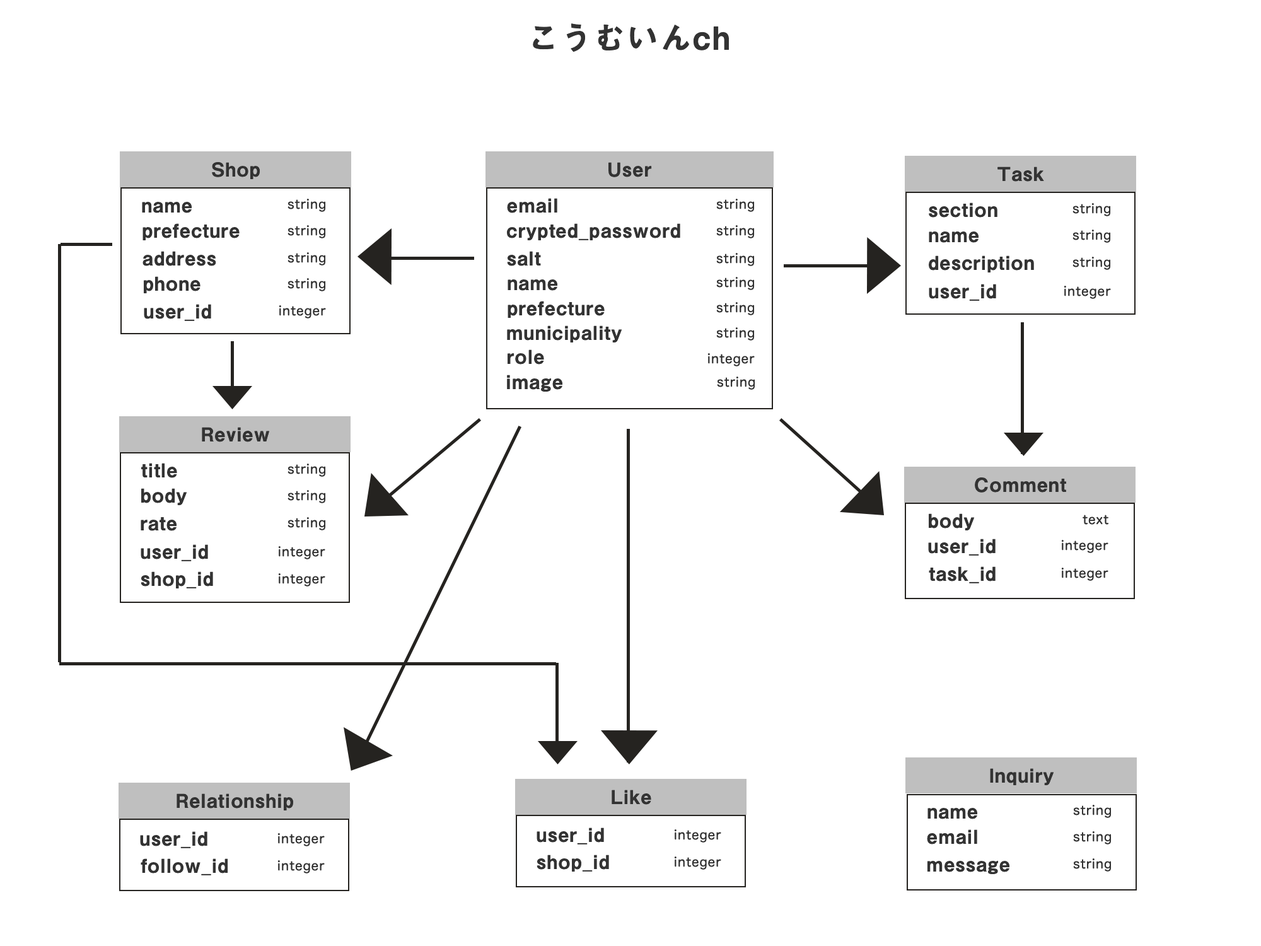
<style>
.page{position:relative;width:1261px;height:946px;background:#ffffff}
.page>*{position:absolute;margin:0}
.t1{font:31.5px "MidashiGoPr6N-MB31";letter-spacing:0.05em;color:#333333}
.t2{font:18.9px "MidashiGoPr6N-MB31";letter-spacing:0.05em;color:#333333}
.t3{font:12.6px "HiraMaruPro-W4";letter-spacing:0.05em;color:#333333}
</style>
<div class="page">
<p class="t1" style="left:533px;top:23px;width:196px;height:29px">こうむいんch</p>
<p class="t2" style="left:212px;top:162px;width:48px;height:18px">Shop</p>
<p class="t2" style="left:608px;top:162px;width:44px;height:15px">User</p>
<p class="t2" style="left:997px;top:166px;width:47px;height:16px">Task</p>
<p class="t2" style="left:507px;top:198px;width:50px;height:15px">email</p>
<p class="t2" style="left:142px;top:202px;width:50px;height:11px">name</p>
<p class="t3" style="left:287px;top:199px;width:39px;height:13px">string</p>
<p class="t3" style="left:716px;top:199px;width:39px;height:13px">string</p>
<p class="t2" style="left:929px;top:202px;width:68px;height:16px">section</p>
<p class="t3" style="left:1072px;top:203px;width:39px;height:13px">string</p>
<p class="t2" style="left:142px;top:223px;width:98px;height:18px">prefecture</p>
<p class="t3" style="left:287px;top:225px;width:39px;height:13px">string</p>
<p class="t2" style="left:507px;top:223px;width:173px;height:18px">crypted_password</p>
<p class="t3" style="left:716px;top:225px;width:39px;height:13px">string</p>
<p class="t2" style="left:929px;top:231px;width:50px;height:12px">name</p>
<p class="t3" style="left:1072px;top:229px;width:39px;height:14px">string</p>
<p class="t2" style="left:142px;top:251px;width:74px;height:15px">address</p>
<p class="t3" style="left:287px;top:252px;width:39px;height:13px">string</p>
<p class="t2" style="left:507px;top:251px;width:34px;height:15px">salt</p>
<p class="t3" style="left:716px;top:253px;width:39px;height:13px">string</p>
<p class="t2" style="left:929px;top:255px;width:105px;height:18px">description</p>
<p class="t3" style="left:1072px;top:257px;width:39px;height:13px">string</p>
<p class="t2" style="left:144px;top:276px;width:56px;height:18px">phone</p>
<p class="t3" style="left:287px;top:278px;width:39px;height:13px">string</p>
<p class="t2" style="left:508px;top:279px;width:50px;height:12px">name</p>
<p class="t3" style="left:716px;top:277px;width:39px;height:13px">string</p>
<p class="t2" style="left:929px;top:284px;width:67px;height:17px">user_id</p>
<p class="t3" style="left:1064px;top:286px;width:47px;height:13px">integer</p>
<p class="t2" style="left:144px;top:304px;width:67px;height:17px">user_id</p>
<p class="t3" style="left:279px;top:305px;width:47px;height:13px">integer</p>
<p class="t2" style="left:508px;top:301px;width:97px;height:17px">prefecture</p>
<p class="t3" style="left:716px;top:302px;width:39px;height:13px">string</p>
<p class="t2" style="left:507px;top:325px;width:115px;height:18px">municipality</p>
<p class="t3" style="left:716px;top:327px;width:39px;height:13px">string</p>
<p class="t2" style="left:508px;top:349px;width:36px;height:15px">role</p>
<p class="t3" style="left:707px;top:353px;width:48px;height:13px">integer</p>
<p class="t2" style="left:507px;top:374px;width:56px;height:18px">image</p>
<p class="t3" style="left:717px;top:376px;width:38px;height:14px">string</p>
<p class="t2" style="left:202px;top:427px;width:67px;height:15px">Review</p>
<p class="t2" style="left:141px;top:463px;width:36px;height:15px">title</p>
<p class="t3" style="left:287px;top:463px;width:39px;height:14px">string</p>
<p class="t2" style="left:975px;top:477px;width:91px;height:15px">Comment</p>
<p class="t2" style="left:141px;top:488px;width:46px;height:17px">body</p>
<p class="t3" style="left:287px;top:490px;width:39px;height:13px">string</p>
<p class="t2" style="left:141px;top:517px;width:36px;height:14px">rate</p>
<p class="t3" style="left:287px;top:517px;width:39px;height:13px">string</p>
<p class="t2" style="left:929px;top:513px;width:46px;height:17px">body</p>
<p class="t3" style="left:1082px;top:514px;width:26px;height:11px">text</p>
<p class="t2" style="left:141px;top:544px;width:67px;height:17px">user_id</p>
<p class="t3" style="left:278px;top:546px;width:47px;height:13px">integer</p>
<p class="t2" style="left:928px;top:538px;width:67px;height:17px">user_id</p>
<p class="t3" style="left:1061px;top:540px;width:47px;height:13px">integer</p>
<p class="t2" style="left:929px;top:566px;width:66px;height:17px">task_id</p>
<p class="t3" style="left:1061px;top:567px;width:47px;height:14px">integer</p>
<p class="t2" style="left:141px;top:571px;width:72px;height:18px">shop_id</p>
<p class="t3" style="left:278px;top:573px;width:47px;height:13px">integer</p>
<p class="t2" style="left:990px;top:768px;width:64px;height:18px">Inquiry</p>
<p class="t2" style="left:177px;top:793px;width:116px;height:18px">Relationship</p>
<p class="t2" style="left:612px;top:789px;width:39px;height:15px">Like</p>
<p class="t2" style="left:927px;top:808px;width:51px;height:11px">name</p>
<p class="t3" style="left:1073px;top:804px;width:38px;height:14px">string</p>
<p class="t2" style="left:140px;top:831px;width:67px;height:17px">user_id</p>
<p class="t3" style="left:277px;top:833px;width:48px;height:13px">integer</p>
<p class="t2" style="left:537px;top:827px;width:67px;height:17px">user_id</p>
<p class="t3" style="left:674px;top:829px;width:47px;height:13px">integer</p>
<p class="t2" style="left:927px;top:829px;width:50px;height:15px">email</p>
<p class="t3" style="left:1073px;top:831px;width:38px;height:13px">string</p>
<p class="t2" style="left:537px;top:854px;width:72px;height:18px">shop_id</p>
<p class="t3" style="left:674px;top:856px;width:47px;height:13px">integer</p>
<p class="t2" style="left:141px;top:858px;width:87px;height:17px">follow_id</p>
<p class="t3" style="left:277px;top:860px;width:48px;height:13px">integer</p>
<p class="t2" style="left:927px;top:861px;width:83px;height:13px">message</p>
<p class="t3" style="left:1073px;top:858px;width:38px;height:13px">string</p>
</div>
